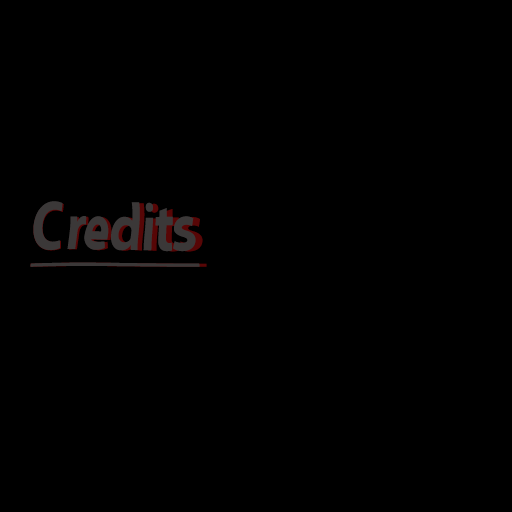
<style>
.page{position:relative;width:512px;height:512px;background:#000000}
.page>*{position:absolute;margin:0}
.t1{font:57.6px "KozGoPr6N-Bold";color:#3b3838;text-decoration:underline;scale:0.92 1}
.t2{font:58.4px "KozGoPr6N-Bold";color:#3b3838;text-decoration:underline;scale:0.87 1}
</style>
<div class="page">
<p class="t1" style="left:30px;top:202px;width:177px;height:65px">Credits</p>
<p class="t2" style="left:30px;top:201px;width:170px;height:66px">Credits</p>
</div>
